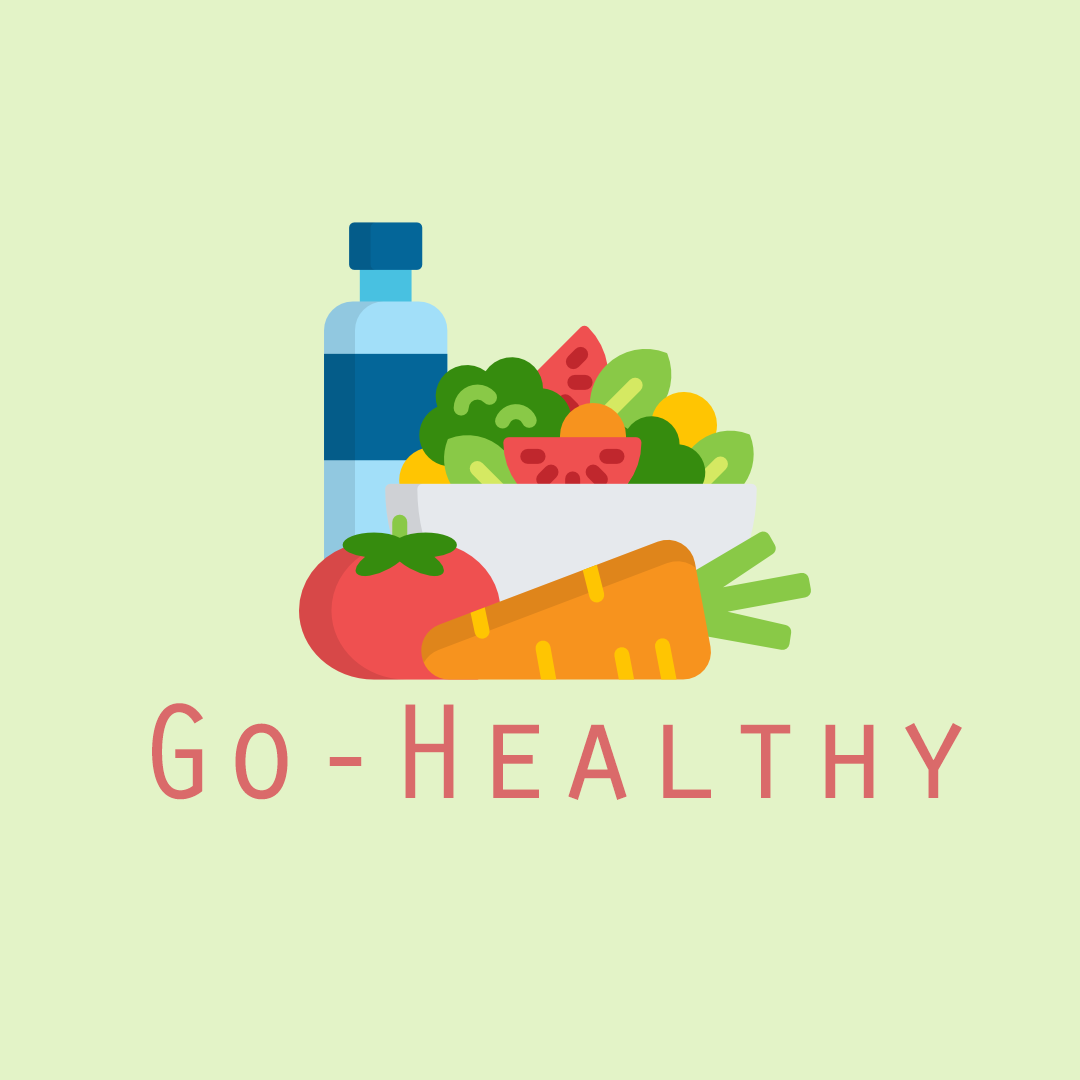
<style>
.page{position:relative;width:1080px;height:1080px;background:#e3f3c7}
.page>*{position:absolute;margin:0}
.t1{font:140px "OratorStd";color:#da6a6a}
</style>
<div class="page">
<p class="t1" style="left:152px;top:703px;width:810px;height:97px">Go-Healthy</p>
</div>
